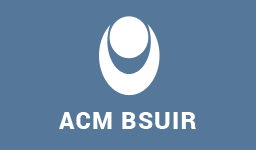
<style>
.page{position:relative;width:256px;height:150px;background:#54779a}
.page>*{position:absolute;margin:0}
.t1{font:24px "Roboto-Black";letter-spacing:0.05em;color:#ffffff}
</style>
<div class="page">
<p class="t1" style="left:59px;top:112px;width:137px;height:17px">ACM BSUIR</p>
</div>
